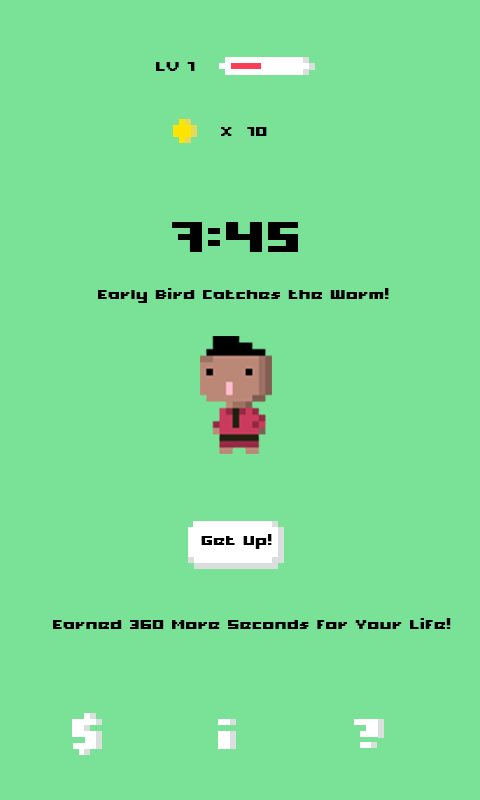
<style>
.page{position:relative;width:480px;height:800px;background:#79e296}
.page>*{position:absolute;margin:0}
.t1{font:14px "Xpdr05";color:#000000}
.t2{font:48px "Xpdr05";color:#000000}
</style>
<div class="page">
<p class="t1" style="left:156px;top:62px;width:39px;height:9px">LV 1</p>
<p class="t1" style="left:221px;top:127px;width:46px;height:9px">×  10</p>
<p class="t2" style="left:172px;top:222px;width:126px;height:30px">7:45</p>
<p class="t1" style="left:98px;top:288px;width:291px;height:15px">Early Bird Catches the Worm!</p>
<p class="t1" style="left:201px;top:534px;width:71px;height:15px">Get Up!</p>
<p class="t1" style="left:53px;top:618px;width:398px;height:11px">Earned 360 More Seconds for Your Life!</p>
</div>
